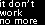
<style>
.page{position:relative;width:45px;height:25px;background:#000000}
.page>*{position:absolute;margin:0}
.t1{font:10.2px/8.4px "Calibri";letter-spacing:0.1em;color:#ffffff}
</style>
<div class="page">
<p class="t1" style="left:0px;top:0px;width:37px;height:24px">it don’t<br>work<br>no more</p>
</div>
